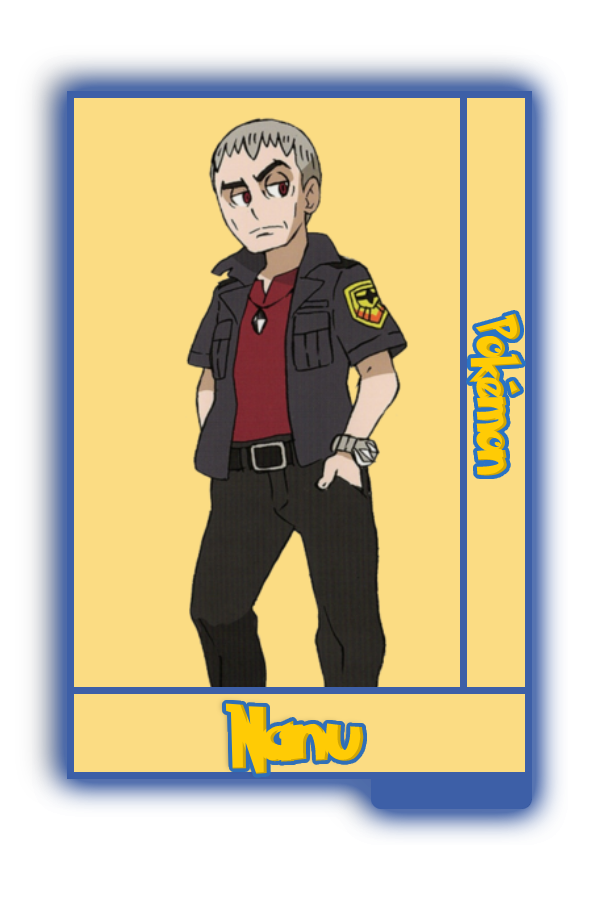
<style>
.page{position:relative;width:600px;height:900px;background:#fbdc83}
.page>*{position:absolute;margin:0}
.t1{font:48.8px "PokemonSolidNormal";color:#ffcb05;scale:0.8 1}
.t2{font:60.1px "PokemonSolidNormal";color:#ffcb05;scale:0.96 1}
</style>
<div class="page">
<p class="t1" style="left:469px;top:313px;width:54px;height:163px;rotate:90deg">Pokémon</p>
<p class="t2" style="left:225px;top:703px;width:139px;height:71px">Nanu</p>
</div>
